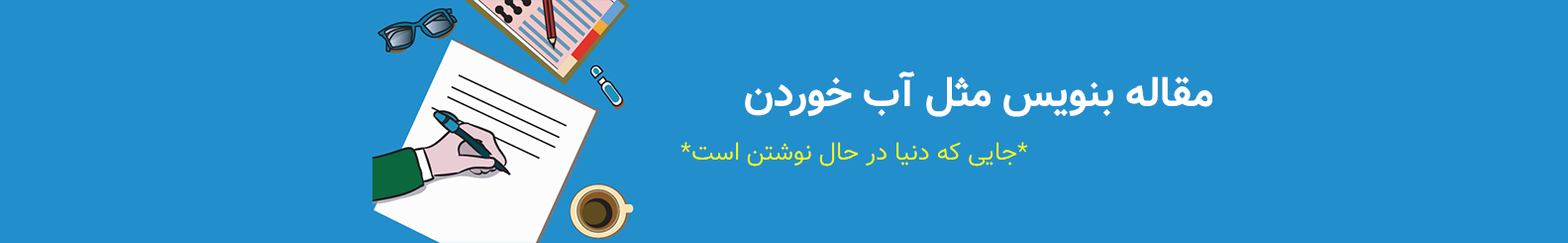
<style>
.page{position:relative;width:1568px;height:243px;background:#228ecc}
.page>*{position:absolute;margin:0}
.t1{font:41.3px "Vazir-Bold";color:#ffffff}
.t2{font:24.8px "Vazir-Light";color:#fcff00}
</style>
<div class="page">
<p class="t1" style="left:745px;top:71px;width:467px;height:46px">مقاله بنویس مثل آب خوردن</p>
<p class="t2" style="left:680px;top:142px;width:348px;height:24px">*جایی که دنیا در حال نوشتن است*</p>
</div>
